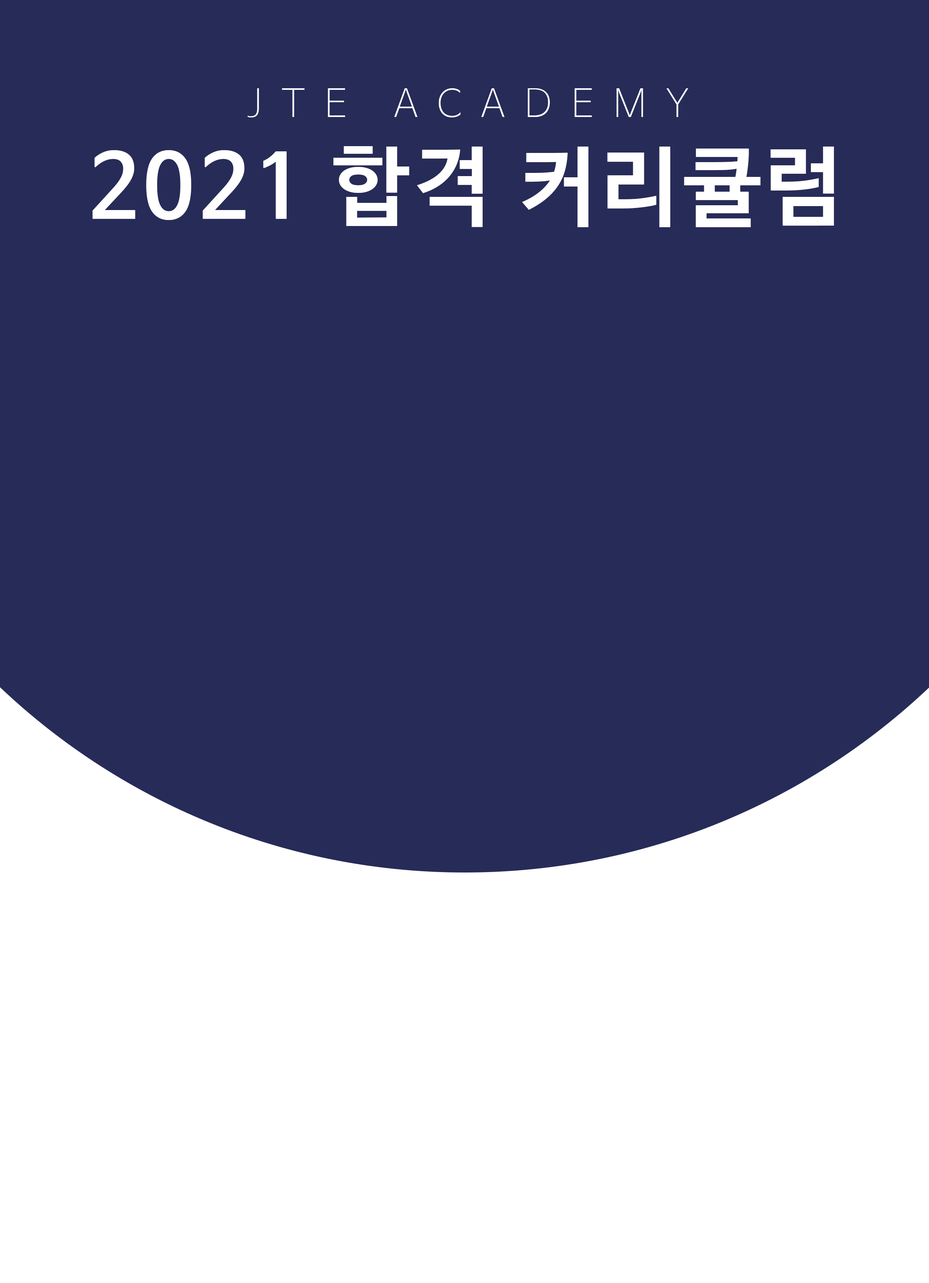
<style>
.page{position:relative;width:929px;height:1283px;background:#272b58}
.page>*{position:absolute;margin:0}
.t1{font:38.1px "NanumBarunGothicUltraLight";letter-spacing:0.5em;color:#ffffff}
.t2{font:86.9px "NanumBarunGothicBold";letter-spacing:0.05em;color:#ffffff}
</style>
<div class="page">
<p class="t1" style="left:248px;top:88px;width:440px;height:29px">JTE ACADEMY</p>
<p class="t2" style="left:92px;top:146px;width:742px;height:81px">2021 합격 커리큘럼</p>
</div>
